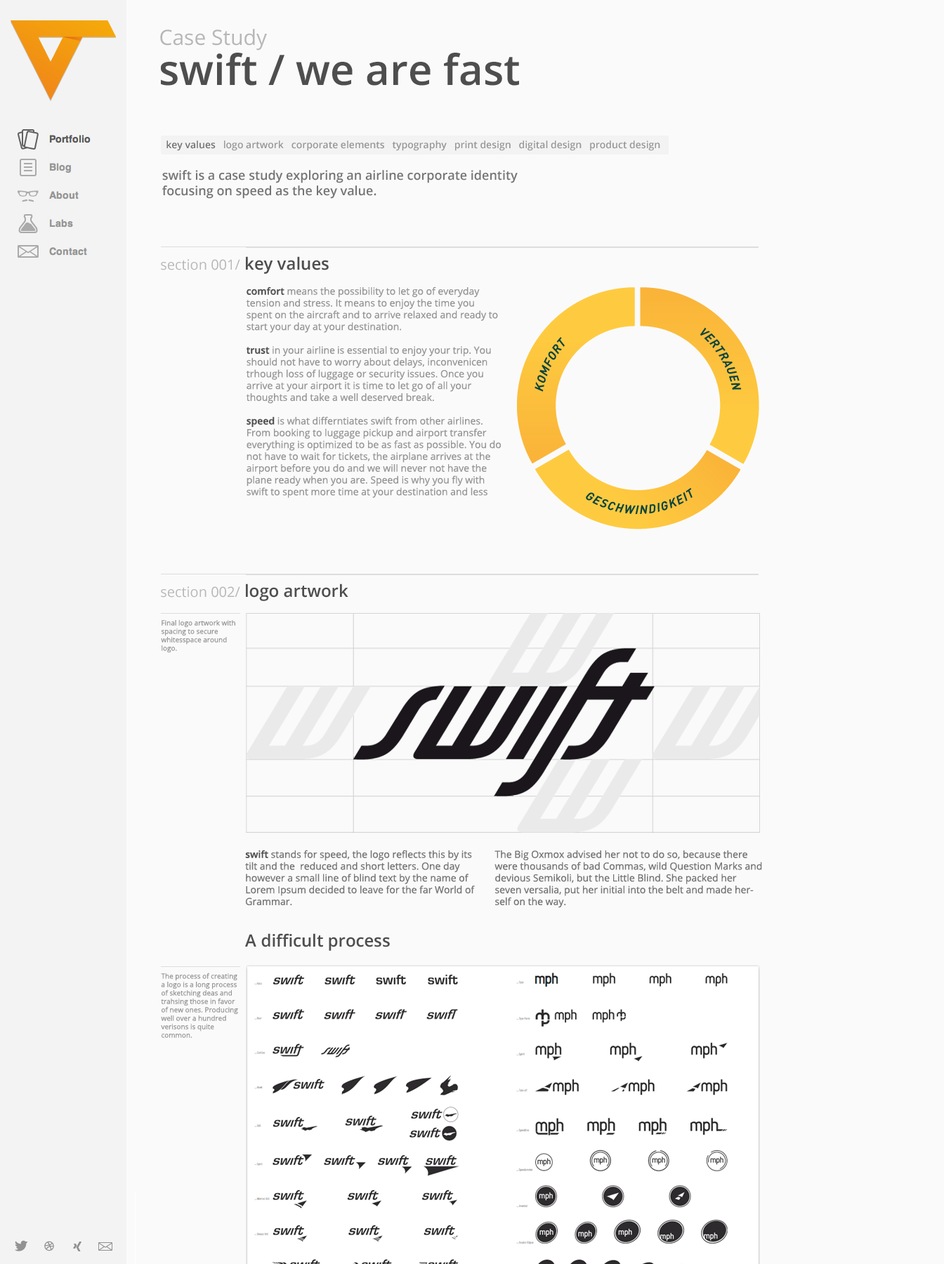
<style>
.page{position:relative;width:944px;height:1264px;background:#fafafa}
.page>*{position:absolute;margin:0}
.t1{font:21.1px "OpenSans";color:#b7b7b7}
.t2{font:42.1px "OpenSans-Semibold";color:#4e4e4e}
.t3{font:9.8px "OpenSans-Semibold";color:#969696}
.t4{font:9.8px "OpenSans-Semibold";color:#4e4e4e}
.t5{font:12.6px "OpenSans-Semibold";color:#747474}
.t6{font:14px "OpenSans";color:#b7b7b7}
.t7{font:16.8px "OpenSans-Semibold";color:#4e4e4e}
.t8{font:9.8px "OpenSans";color:#969696}
.t9{font:7px "OpenSans";color:#969696}
.t10{font:9.8px "OpenSans";color:#747474}
.t11{font:9.8px "OpenSans-Semibold";color:#303030}
</style>
<div class="page">
<p class="t1" style="left:160px;top:29px;width:107px;height:22px">Case Study</p>
<p class="t2" style="left:161px;top:53px;width:358px;height:33px">swift / we are fast</p>
<p class="t3" style="left:166px;top:140px;width:494px;height:11px"><span class="t4">key values   </span>logo artwork   corporate elements   typography   print design   digital design   product design</p>
<p class="t5" style="left:162px;top:170px;width:355px;height:29px">swift is a case study exploring an airline corporate identity<br>focusing on speed as the key value.</p>
<p class="t6" style="left:161px;top:256px;width:168px;height:18px">section 001/ <span class="t7">key values</span></p>
<p class="t8" style="left:246px;top:286px;width:255px;height:212px"><span class="t3">comfort </span>means the possibility to let go of everyday tension and stress. It means to enjoy the time you spent on the aircraft and to arrive relaxed and ready to start your day at your destination.<br><br><span class="t3">trust</span> in your airline is essential to enjoy your trip. You should not have to worry about delays, inconvenicen trhough loss of luggage or security issues. Once you arrive at your airport it is time to let go of all your thoughts and take a well deserved break.<br><br><span class="t3">speed </span>is what differntiates swift from other airlines. From booking to luggage pickup and airport transfer everything is optimized to be as fast as possible. You do not have to wait for tickets, the airplane arrives at the airport before you do and we will never not have the plane ready when you are. Speed is why you fly with swift to spent more time at your destination and less time on the airport.</p>
<p class="t6" style="left:161px;top:583px;width:187px;height:18px">section 002/ <span class="t7">logo artwork</span></p>
<p class="t9" style="left:161px;top:620px;width:74px;height:33px">Final logo artwork with spacing to secure whitesspace around logo.</p>
<p class="t10" style="left:245px;top:850px;width:230px;height:56px"><span class="t11">swift </span>stands for speed, the logo reflects this by its tilt and the  reduced and short letters. One day however a small line of blind text by the name of Lorem Ipsum decided to leave for the far World of Grammar.</p>
<p class="t10" style="left:494px;top:850px;width:268px;height:58px">The Big Oxmox advised her not to do so, because there were thousands of bad Commas, wild Question Marks and devious Semikoli, but the Little Blind. She packed her seven versalia, put her initial into the belt and made herself on the way.</p>
<p class="t7" style="left:245px;top:933px;width:145px;height:18px">A difficult process</p>
<p class="t9" style="left:161px;top:972px;width:77px;height:66px">The process of creating a logo is a long process of sketching deas and trahsing those in favor of new ones. Producing well over a hundred verisons is quite common.</p>
</div>
